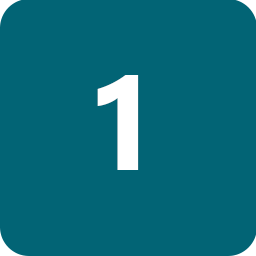
<style>
.page{position:relative;width:256px;height:256px;background:#026475}
.page>*{position:absolute;margin:0}
.t1{font:133.3px "LeelawadeeUI-Bold";color:#ffffff}
</style>
<div class="page">
<p class="t1" style="left:97px;top:75px;width:42px;height:95px">1</p>
</div>
